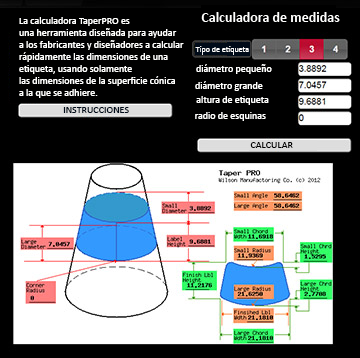
<style>
.page{position:relative;width:360px;height:358px;background:#000000}
.page>*{position:absolute;margin:0}
.t1{font:10px "Calibri";color:#fffffe}
.t2{font:8px "Calibri";color:#ffffff}
.t3{font:10px "Calibri";color:#000b19}
.t4{font:10px "Calibri";color:#010101}
</style>
<div class="page">
<p class="t1" style="left:19px;top:17px;width:165px;height:81px">La calculadora TaperPRO es <br>una herramienta diseñada para ayudar <br>a los fabricantes y diseñadores a calcular <br>rápidamente las dimensiones de una <br>etiqueta, usando solamente <br>las dimensiones de la superficie cónica <br>a la que se adhiere.</p>
<p class="t2" style="left:195px;top:46px;width:54px;height:9px">Tipo de etiqueta</p>
<p class="t1" style="left:196px;top:64px;width:76px;height:10px">diámetro pequeño</p>
<p class="t1" style="left:195px;top:81px;width:68px;height:10px">diámetro grande</p>
<p class="t1" style="left:196px;top:96px;width:73px;height:9px">altura de etiqueta</p>
<p class="t3" style="left:63px;top:107px;width:66px;height:6px">INSTRUCCIONES</p>
<p class="t1" style="left:195px;top:112px;width:71px;height:9px">radio de esquinas</p>
<p class="t4" style="left:250px;top:142px;width:43px;height:6px">CALCULAR</p>
</div>
